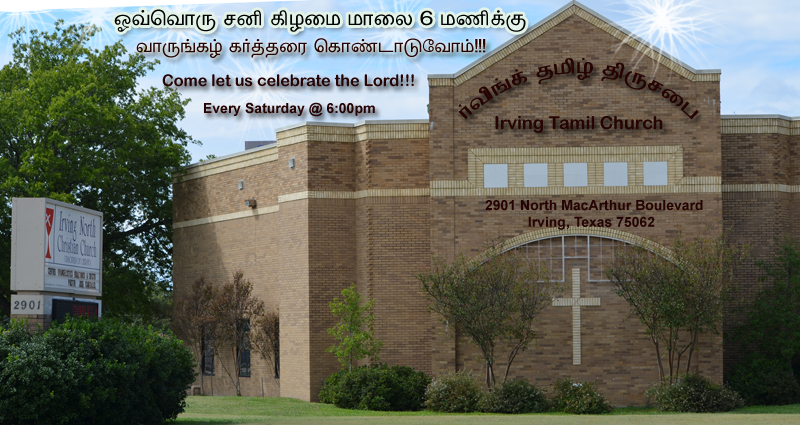
<style>
.page{position:relative;width:800px;height:425px}
.page>*{position:absolute;margin:0}
.t1{font:18px "TSCuSaiIndira";color:#000203}
.t2{font:16px "TSCuSaiIndira";color:#250403}
.t3{font:18px "TSCuSaiIndira";color:#250403}
.t4{font:16px "ArialRoundedMTBold";color:#250403}
.t5{font:14px "Arial-BoldMT";color:#250403}
.t6{font:18px "ArialRoundedMTBold";color:#250403}
</style>
<div class="page">
<p class="t1" style="left:114px;top:9px;width:412px;height:23px">µù¦Å¡Õ ºÉ¢ ¸¢Æ¨Á Á¡¨Ä 6 Á½¢ìÌ</p>
<p class="t2" style="left:136px;top:38px;width:350px;height:20px">Å¡Õí¸ú ¸÷ò¾¨Ã ¦¸¡ñ¼¡Î§Å¡õ!!!</p>
<p class="t3" style="left:458px;top:58px;width:241px;height:62px">÷Å¢íì ¾Á¢ú ¾¢Õº¨À</p>
<p class="t4" style="left:162px;top:74px;width:252px;height:13px">Come let us celebrate the Lord!!!</p>
<p class="t5" style="left:204px;top:102px;width:171px;height:15px">Every Saturday @ 6:00pm</p>
<p class="t6" style="left:495px;top:116px;width:168px;height:17px">Irving Tamil Church</p>
<p class="t5" style="left:485px;top:200px;width:218px;height:30px">2901 North MacArthur Boulevard <br>           Irving, Texas 75062</p>
</div>
